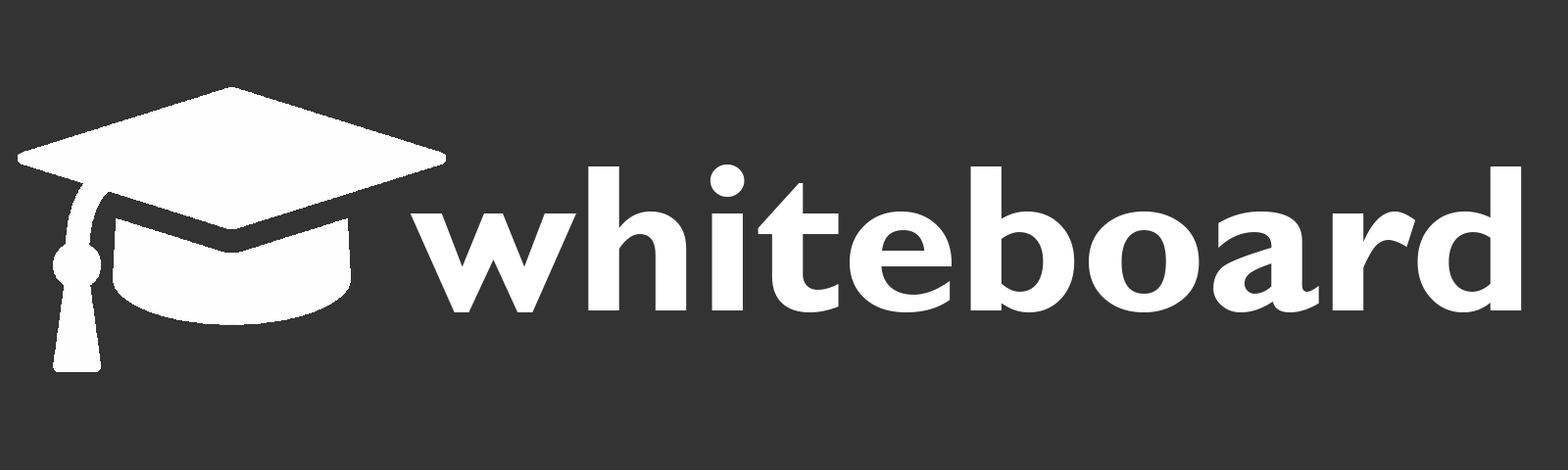
<style>
.page{position:relative;width:1568px;height:470px;background:#333333}
.page>*{position:absolute;margin:0}
.t1{font:211.1px "GillSansMT-Bold";color:#ffffff}
</style>
<div class="page">
<p class="t1" style="left:410px;top:165px;width:1112px;height:148px">whiteboard</p>
</div>
